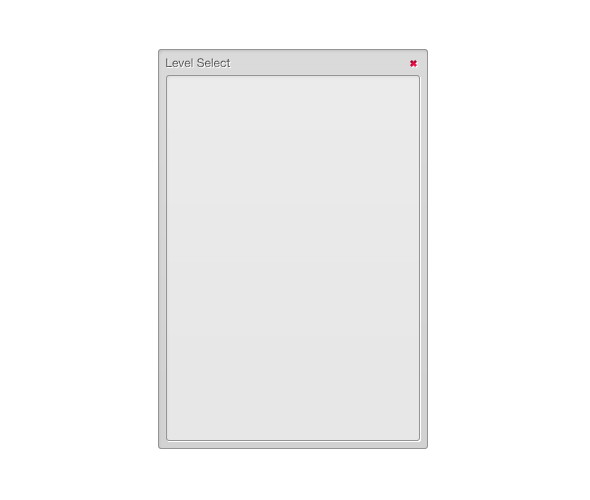
<style>
.page{position:relative;width:590px;height:500px;background:#ffffff}
.page>*{position:absolute;margin:0}
.t1{font:12px "HelveticaNeue";color:#5d5d5d}
</style>
<div class="page">
<p class="t1" style="left:166px;top:58px;width:64px;height:10px">Level Select</p>
</div>
